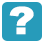
<style>
.page{position:relative;width:45px;height:43px;background:#279bba}
.page>*{position:absolute;margin:0}
.t1{font:38px "Arial-Black";color:#ffffff;scale:1.15 1}
</style>
<div class="page">
<p class="t1" style="left:9px;top:6px;width:25px;height:29px">?</p>
</div>
